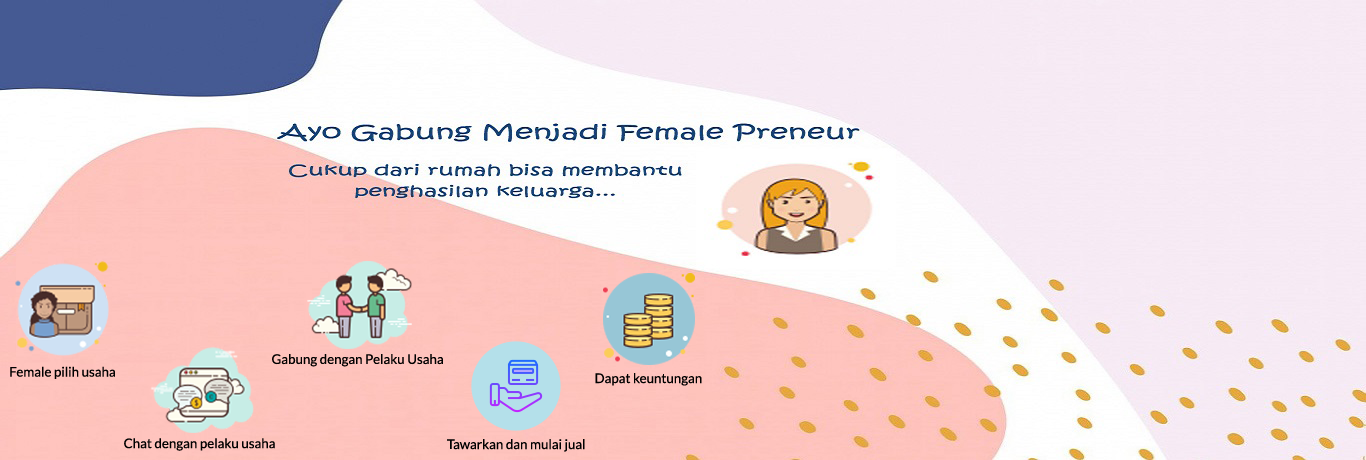
<style>
.page{position:relative;width:1366px;height:460px}
.page>*{position:absolute;margin:0}
.t1{font:13.3px "Lato-Regular";color:#000000}
</style>
<div class="page">
<p class="t1" style="left:10px;top:366px;width:105px;height:13px">Female pilih usaha</p>
<p class="t1" style="left:272px;top:354px;width:171px;height:13px">Gabung dengan Pelaku Usaha</p>
<p class="t1" style="left:595px;top:373px;width:107px;height:13px">Dapat keuntungan</p>
<p class="t1" style="left:124px;top:438px;width:151px;height:13px">Chat dengan pelaku usaha</p>
<p class="t1" style="left:447px;top:439px;width:138px;height:13px">Tawarkan dan mulai jual</p>
</div>
